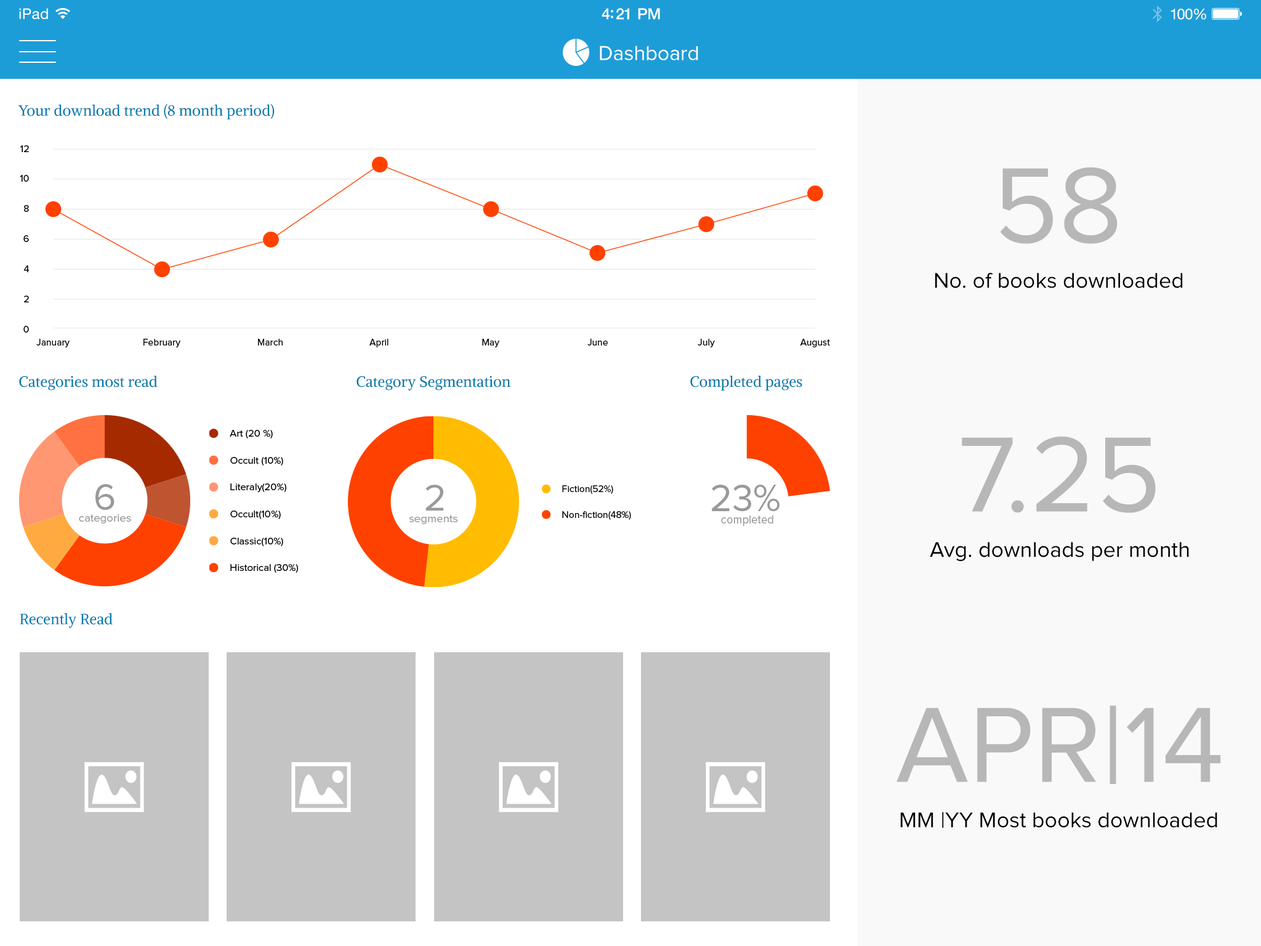
<style>
.page{position:relative;width:1261px;height:946px;background:#ffffff}
.page>*{position:absolute;margin:0}
.t1{font:14.6px "HelveticaNeue";letter-spacing:0.02em;color:#ffffff}
.t2{font:15.4px "HelveticaNeue-Medium";letter-spacing:-0.02em;color:#ffffff}
.t3{font:14.8px "HelveticaNeue";letter-spacing:-0.02em;color:#ffffff}
.t4{font:20.9px "ProximaNova-Regular";color:#ffffff}
.t5{font:14.8px "Alike-Regular";color:#0079ad}
.t6{font:110.8px "ProximaNova-Regular";color:#b7b7b7}
.t7{font:22.2px "ProximaNova-Regular";color:#000000}
</style>
<div class="page">
<p class="t1" style="left:19px;top:8px;width:29px;height:11px">iPad</p>
<p class="t2" style="left:602px;top:8px;width:58px;height:12px">4:21 PM</p>
<p class="t3" style="left:1170px;top:9px;width:36px;height:11px">100%</p>
<p class="t4" style="left:600px;top:46px;width:98px;height:14px">Dashboard</p>
<p class="t5" style="left:18px;top:103px;width:257px;height:16px">Your download trend (8 month period)</p>
<p class="t6" style="left:1000px;top:167px;width:117px;height:77px">58</p>
<p class="t7" style="left:935px;top:273px;width:248px;height:15px">No. of books downloaded</p>
<p class="t5" style="left:19px;top:375px;width:139px;height:15px">Categories most read</p>
<p class="t5" style="left:356px;top:376px;width:154px;height:15px">Category Segmentation</p>
<p class="t5" style="left:690px;top:375px;width:112px;height:15px">Completed pages</p>
<p class="t6" style="left:962px;top:436px;width:194px;height:77px">7.25</p>
<p class="t7" style="left:930px;top:542px;width:259px;height:19px">Avg. downloads per month</p>
<p class="t5" style="left:20px;top:613px;width:93px;height:15px">Recently Read</p>
<p class="t6" style="left:896px;top:705px;width:325px;height:79px">APR|14</p>
<p class="t7" style="left:900px;top:811px;width:317px;height:16px">MM |YY Most books downloaded</p>
</div>
